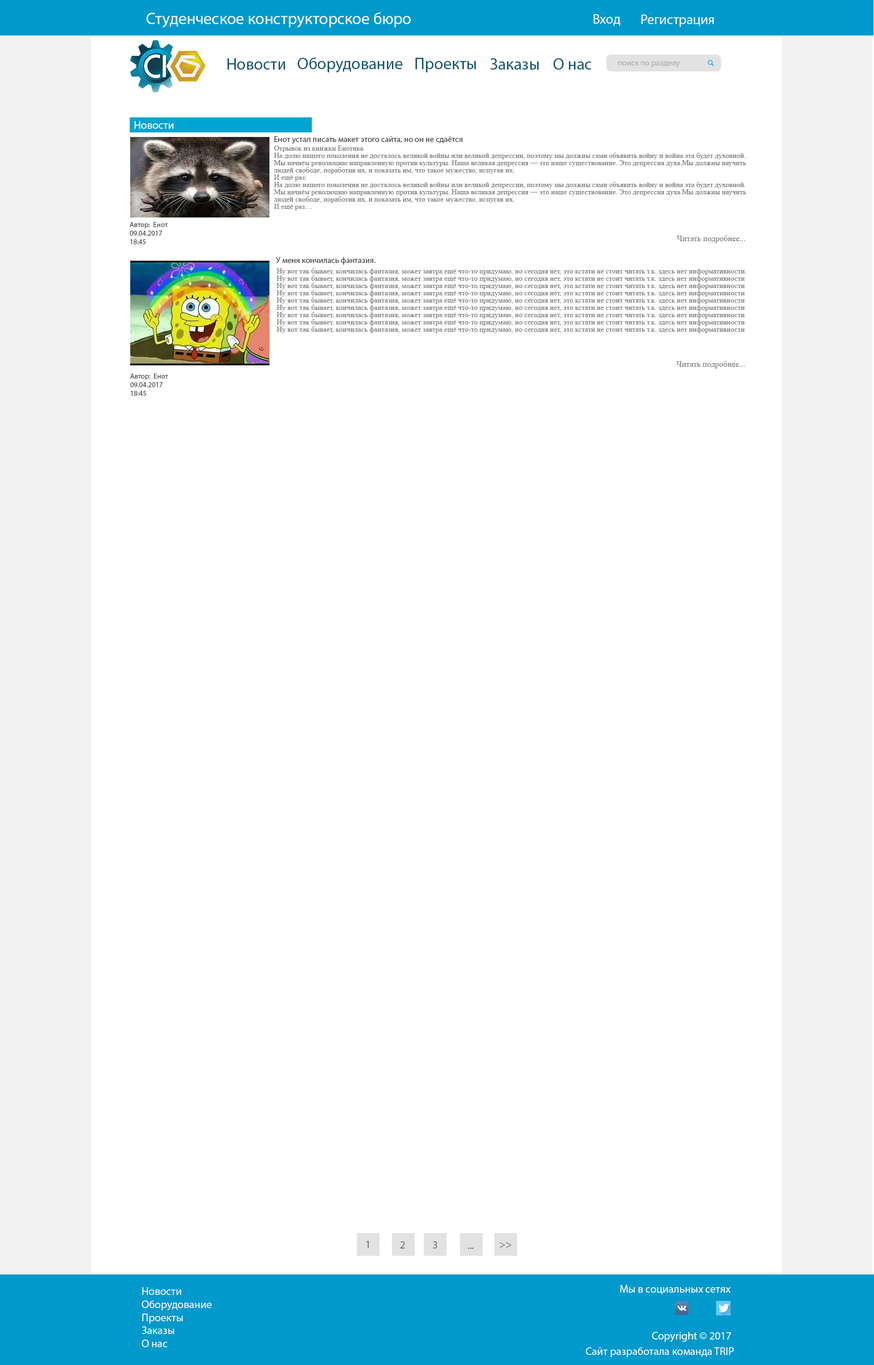
<style>
.page{position:relative;width:874px;height:1365px;background:#ffffff}
.page>*{position:absolute;margin:0}
.t1{font:16.4px "MyriadPro-Regular";color:#f8fdff}
.t2{font:13.6px "MyriadPro-Regular";color:#f8fdff}
.t3{font:16.4px "MyriadPro-Regular";color:#12556a}
.t4{font:8.2px "MyriadPro-Regular";color:#b3adad}
.t5{font:10.9px "MyriadPro-Regular";color:#ffffff}
.t6{font:8.2px "MyriadPro-Regular";color:#464646}
.t7{font:7.3px/7.3px "TimesNewRomanPSMT";color:#747474}
.t8{font:7.3px "MyriadPro-Regular";color:#464646}
.t9{font:8.2px "TimesNewRomanPSMT";color:#747474}
.t10{font:10.9px "MyriadPro-Regular";color:#747474}
.t11{font:10.9px "MyriadPro-Regular";color:#f8f3f3}
.t12{font:10.9px "MyriadPro-Regular";color:#f8fdff}
</style>
<div class="page">
<p class="t1" style="left:147px;top:12px;width:264px;height:16px">Студенческое конструкторское бюро</p>
<p class="t2" style="left:593px;top:14px;width:27px;height:12px">Вход</p>
<p class="t2" style="left:641px;top:15px;width:72px;height:12px">Регистрация</p>
<p class="t3" style="left:227px;top:58px;width:58px;height:12px">Новости</p>
<p class="t3" style="left:298px;top:57px;width:104px;height:16px">Оборудование</p>
<p class="t3" style="left:415px;top:58px;width:61px;height:14px">Проекты</p>
<p class="t3" style="left:490px;top:58px;width:49px;height:12px">Заказы</p>
<p class="t3" style="left:553px;top:58px;width:38px;height:12px">О нас</p>
<p class="t4" style="left:618px;top:61px;width:62px;height:6px">поиск по разделу</p>
<p class="t5" style="left:134px;top:121px;width:39px;height:8px">Новости</p>
<p class="t6" style="left:274px;top:136px;width:188px;height:8px">Енот устал писать макет этого сайта, но он не сдаётся</p>
<p class="t7" style="left:274px;top:146px;width:472px;height:64px">Отрывок из книжки Енотика<br>На долю нашего поколения не досталось великой войны или великой депрессии, поэтому мы должны сами объявить войну и война эта будет духовной.<br>Мы начнём революцию направленную против культуры. Наша великая депрессия — это наше существование. Это депрессия духа.Мы должны научить <br>людей свободе, поработив их, и показать им, что такое мужество, испугав их.<br>И ещё раз:<br>На долю нашего поколения не досталось великой войны или великой депрессии, поэтому мы должны сами объявить войну и война эта будет духовной.<br>Мы начнём революцию направленную против культуры. Наша великая депрессия — это наше существование. Это депрессия духа.Мы должны научить <br>людей свободе, поработив их, и показать им, что такое мужество, испугав их.<br>И ещё раз....</p>
<p class="t8" style="left:130px;top:222px;width:38px;height:22px">Автор:  Енот<br>09.04.2017<br>18:45</p>
<p class="t9" style="left:676px;top:235px;width:69px;height:8px">Читать подробнее...</p>
<p class="t6" style="left:276px;top:257px;width:99px;height:8px">У меня кончилась фантазия.</p>
<p class="t7" style="left:277px;top:268px;width:469px;height:65px">Ну вот так бывает, кончилась фантазия, может завтра ещё что-то придумаю, но сегодня нет, это кстати не стоит читать т.к. здесь нет информативности.<br>Ну вот так бывает, кончилась фантазия, может завтра ещё что-то придумаю, но сегодня нет, это кстати не стоит читать т.к. здесь нет информативности<br>Ну вот так бывает, кончилась фантазия, может завтра ещё что-то придумаю, но сегодня нет, это кстати не стоит читать т.к. здесь нет информативности<br>Ну вот так бывает, кончилась фантазия, может завтра ещё что-то придумаю, но сегодня нет, это кстати не стоит читать т.к. здесь нет информативности<br>Ну вот так бывает, кончилась фантазия, может завтра ещё что-то придумаю, но сегодня нет, это кстати не стоит читать т.к. здесь нет информативности<br>Ну вот так бывает, кончилась фантазия, может завтра ещё что-то придумаю, но сегодня нет, это кстати не стоит читать т.к. здесь нет информативности<br>Ну вот так бывает, кончилась фантазия, может завтра ещё что-то придумаю, но сегодня нет, это кстати не стоит читать т.к. здесь нет информативности<br>Ну вот так бывает, кончилась фантазия, может завтра ещё что-то придумаю, но сегодня нет, это кстати не стоит читать т.к. здесь нет информативности<br>Ну вот так бывает, кончилась фантазия, может завтра ещё что-то придумаю, но сегодня нет, это кстати не стоит читать т.к. здесь нет информативности</p>
<p class="t9" style="left:676px;top:361px;width:68px;height:8px">Читать подробнее...</p>
<p class="t8" style="left:130px;top:374px;width:38px;height:22px">Автор:  Енот<br>09.04.2017<br>18:45</p>
<p class="t10" style="left:366px;top:1241px;width:3px;height:7px">1</p>
<p class="t10" style="left:400px;top:1241px;width:5px;height:8px">2</p>
<p class="t10" style="left:432px;top:1241px;width:5px;height:8px">3</p>
<p class="t10" style="left:467px;top:1247px;width:7px;height:2px">...</p>
<p class="t10" style="left:499px;top:1242px;width:12px;height:6px">&gt;&gt;</p>
<p class="t11" style="left:142px;top:1287px;width:70px;height:60px">Новости<br>Оборудование<br>Проекты<br>Заказы<br>О нас</p>
<p class="t12" style="left:620px;top:1285px;width:110px;height:9px">Мы в социальных сетях</p>
<p class="t12" style="left:652px;top:1332px;width:79px;height:10px">Copyright © 2017</p>
<p class="t11" style="left:586px;top:1347px;width:147px;height:10px">Сайт разработала команда TRIP</p>
</div>
